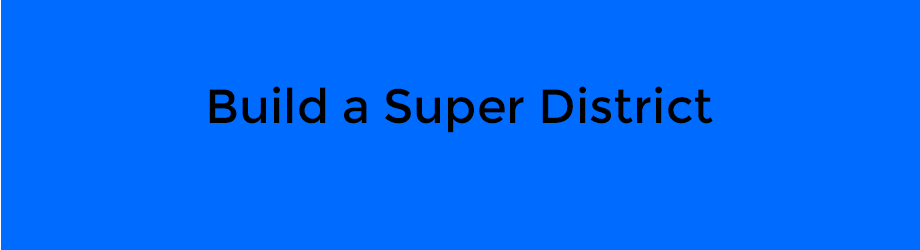
<style>
.page{position:relative;width:920px;height:250px;background:#006cff}
.page>*{position:absolute;margin:0}
.t1{font:48px "Montserrat-Regular";color:#000000}
</style>
<div class="page">
<p class="t1" style="left:209px;top:86px;width:504px;height:47px">Build a Super District</p>
</div>
